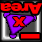
<style>
.page{position:relative;width:42px;height:42px}
.page>*{position:absolute;margin:0}
.t1{font:14.4px "Arial-Black";letter-spacing:-0.075em;color:#ff0000;scale:1.25 1}
.t2{font:12.6px "Arial-Black";letter-spacing:-0.075em;color:#ff0000;scale:1.25 1}
.t3{font:28.8px "Arial-Black";letter-spacing:-0.075em;color:#ff0000;scale:2.2 1}
</style>
<div class="page">
<p class="t1" style="left:0px;top:3px;width:42px;height:11px;rotate:-180deg">Area</p>
<p class="t2" style="left:13px;top:17px;width:13px;height:10px;rotate:-180deg">X</p>
<p class="t3" style="left:21px;top:34px;width:19px;height:5px;rotate:-180deg">-</p>
</div>
